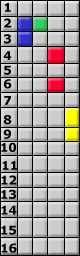
<style>
.page{position:relative;width:80px;height:256px;background:#cccccc}
.page>*{position:absolute;margin:0}
.t1{font:12px "Verdana-Bold";color:#000000}
</style>
<div class="page">
<p class="t1" style="left:5px;top:3px;width:6px;height:9px">1</p>
<p class="t1" style="left:4px;top:18px;width:8px;height:10px">2</p>
<p class="t1" style="left:4px;top:34px;width:7px;height:10px">3</p>
<p class="t1" style="left:3px;top:51px;width:9px;height:9px">4</p>
<p class="t1" style="left:4px;top:65px;width:7px;height:10px">5</p>
<p class="t1" style="left:4px;top:79px;width:8px;height:10px">6</p>
<p class="t1" style="left:4px;top:96px;width:7px;height:9px">7</p>
<p class="t1" style="left:3px;top:115px;width:9px;height:10px">8</p>
<p class="t1" style="left:3px;top:129px;width:8px;height:10px">9</p>
<p class="t1" style="left:1px;top:142px;width:15px;height:10px">10</p>
<p class="t1" style="left:2px;top:161px;width:15px;height:9px">11</p>
<p class="t1" style="left:1px;top:175px;width:16px;height:10px">12</p>
<p class="t1" style="left:1px;top:189px;width:15px;height:10px">13</p>
<p class="t1" style="left:1px;top:205px;width:16px;height:10px">14</p>
<p class="t1" style="left:1px;top:225px;width:15px;height:10px">15</p>
<p class="t1" style="left:1px;top:243px;width:16px;height:10px">16</p>
</div>
